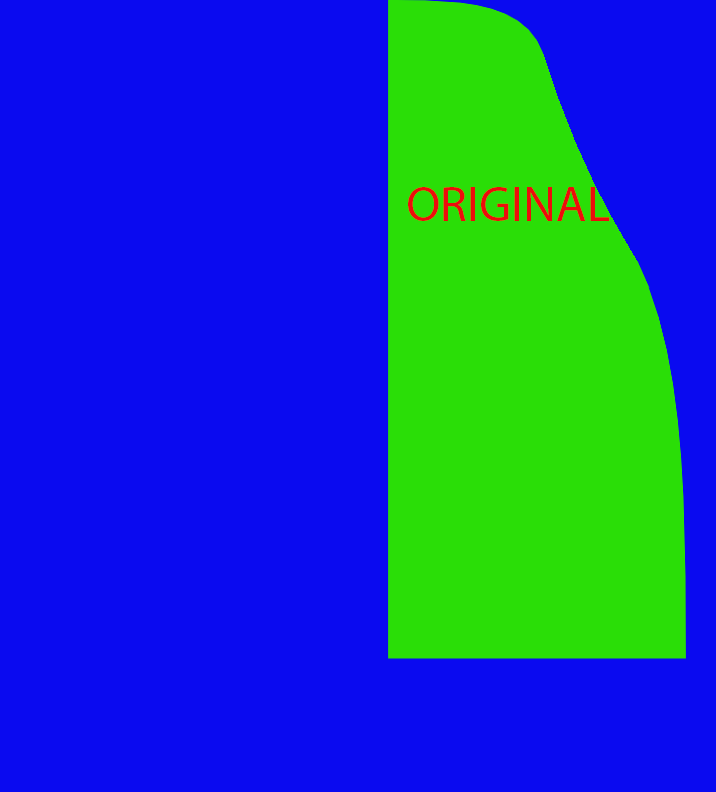
<style>
.page{position:relative;width:716px;height:792px;background:#0a0af0}
.page>*{position:absolute;margin:0}
.t1{font:50px "MyriadPro-Regular";color:#ed0c0c}
</style>
<div class="page">
<p class="t1" style="left:408px;top:187px;width:202px;height:34px">ORIGINAL</p>
</div>
